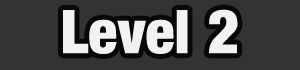
<style>
.page{position:relative;width:300px;height:70px;background:#333333}
.page>*{position:absolute;margin:0}
.t1{font:60px "Harvest";color:#f2f2f2}
</style>
<div class="page">
<p class="t1" style="left:63px;top:9px;width:175px;height:45px">Level 2</p>
</div>
